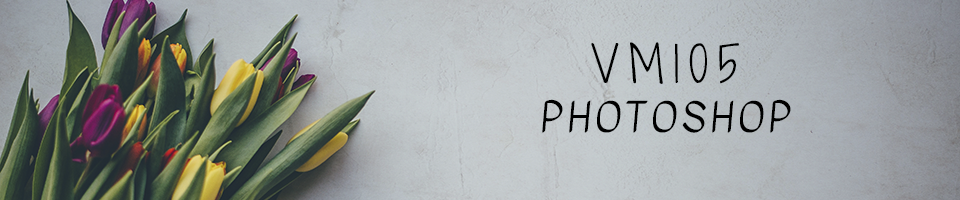
<style>
.page{position:relative;width:960px;height:200px}
.page>*{position:absolute;margin:0}
.t1{font:40px "Kavivanar-Regular";letter-spacing:0.1em;color:#000000;text-transform:uppercase}
.t2{font:48px "ShadowsIntoLightTwo-Regular";letter-spacing:0.2em;color:#000000;text-transform:uppercase}
</style>
<div class="page">
<p class="t1" style="left:542px;top:42px;width:249px;height:91px;text-align:center"><span class="t2">VM105<br></span>photoshop</p>
</div>
